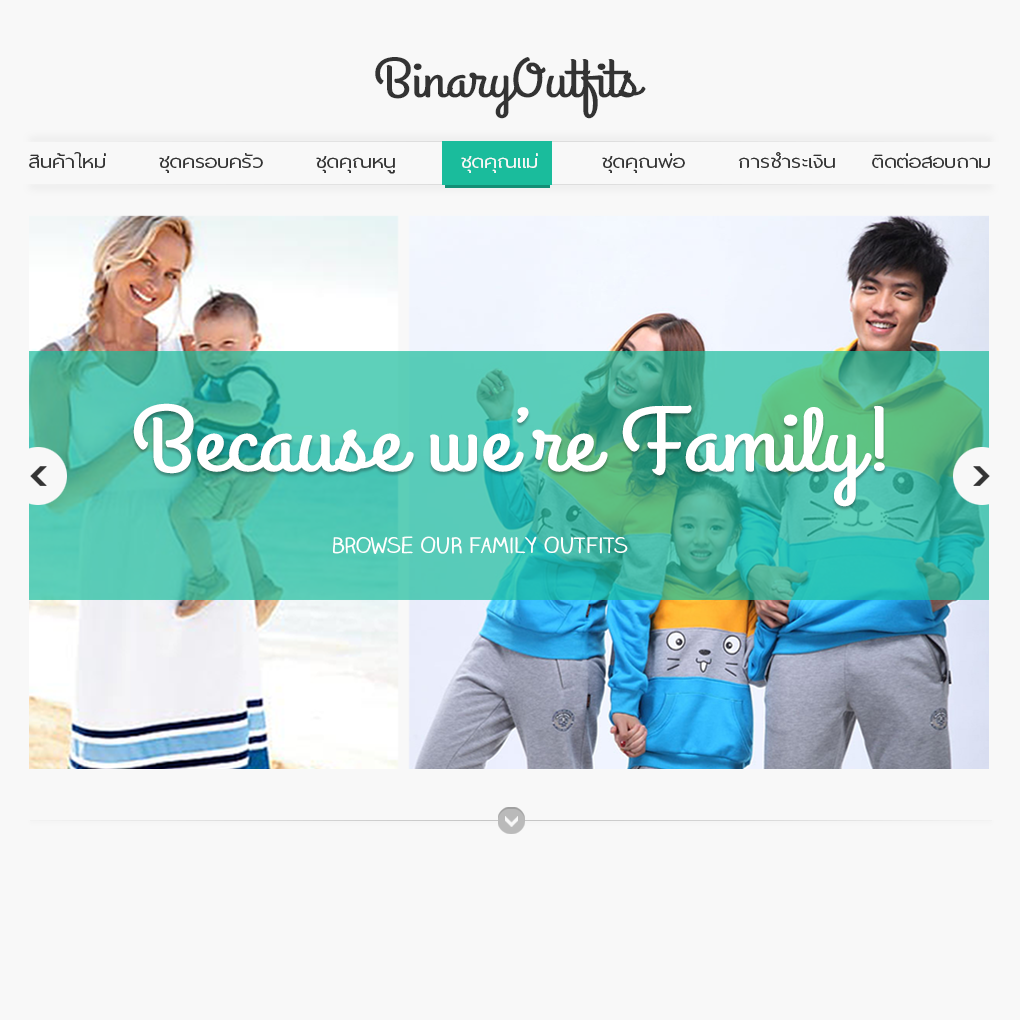
<style>
.page{position:relative;width:1020px;height:1020px;background:#f8f8f8}
.page>*{position:absolute;margin:0}
.t1{font:54px "GrandHotel-Regular";color:#333333;scale:1.2 1}
.t2{font:24px "ThaiSansNeue-Regular";color:#333333;scale:1.2 1}
.t3{font:24px "ThaiSansNeue-Regular";color:#f8f8f8;scale:1.2 1}
.t4{font:90px "GrandHotel-Regular";color:#ffffff;scale:1.2 1}
.t5{font:21px "ClaireHand-Regular";color:#ffffff;scale:1.2 1}
</style>
<div class="page">
<p class="t1" style="left:375px;top:57px;width:271px;height:62px">BinaryOutfits</p>
<p class="t2" style="left:29px;top:152px;width:77px;height:16px">สินค้าใหม่</p>
<p class="t2" style="left:159px;top:153px;width:104px;height:20px">ชุดครอบครัว</p>
<p class="t2" style="left:316px;top:156px;width:79px;height:18px">ชุดคุณหนู</p>
<p class="t3" style="left:461px;top:153px;width:77px;height:20px">ชุดคุณแม่</p>
<p class="t2" style="left:602px;top:153px;width:83px;height:20px">ชุดคุณพ่อ</p>
<p class="t2" style="left:738px;top:152px;width:97px;height:16px">การชำระเงิน</p>
<p class="t2" style="left:872px;top:153px;width:118px;height:15px">ติดต่อสอบถาม</p>
<p class="t4" style="left:133px;top:403px;width:752px;height:104px">Because we’re Family!</p>
<p class="t5" style="left:333px;top:536px;width:295px;height:18px">browse OUR family OUTfits</p>
</div>
